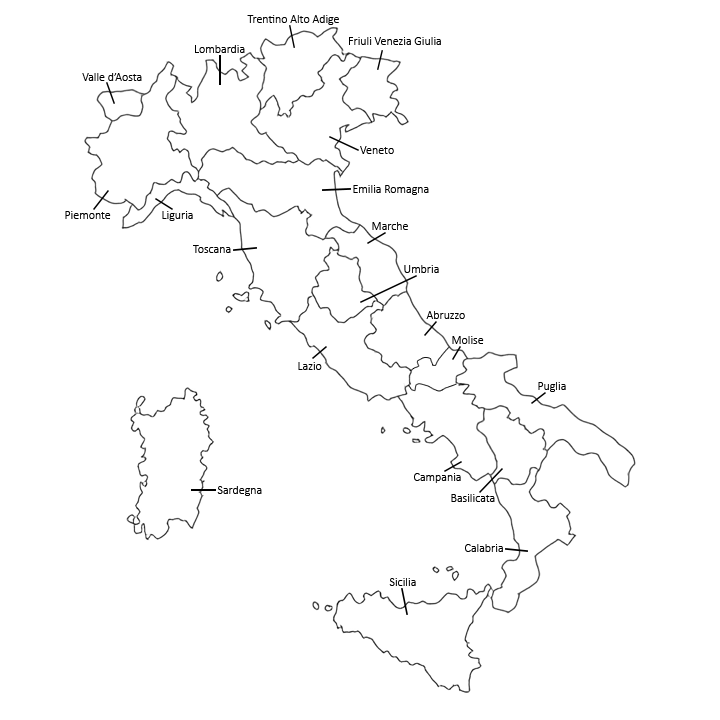
<style>
.page{position:relative;width:720px;height:720px;background:#ffffff}
.page>*{position:absolute;margin:0}
.t1{font:12px "Calibri-Light";color:#000000}
</style>
<div class="page">
<p class="t1" style="left:247px;top:15px;width:92px;height:10px">Trentino Alto Adige</p>
<p class="t1" style="left:349px;top:37px;width:92px;height:8px">Friuli Venezia Giulia</p>
<p class="t1" style="left:195px;top:45px;width:50px;height:8px">Lombardia</p>
<p class="t1" style="left:82px;top:73px;width:60px;height:8px">Valle d’Aosta</p>
<p class="t1" style="left:360px;top:146px;width:34px;height:8px">Veneto</p>
<p class="t1" style="left:353px;top:185px;width:76px;height:10px">Emilia Romagna</p>
<p class="t1" style="left:65px;top:211px;width:46px;height:8px">Piemonte</p>
<p class="t1" style="left:162px;top:211px;width:31px;height:10px">Liguria</p>
<p class="t1" style="left:372px;top:222px;width:36px;height:8px">Marche</p>
<p class="t1" style="left:193px;top:245px;width:38px;height:8px">Toscana</p>
<p class="t1" style="left:404px;top:265px;width:35px;height:8px">Umbria</p>
<p class="t1" style="left:426px;top:311px;width:39px;height:8px">Abruzzo</p>
<p class="t1" style="left:452px;top:336px;width:32px;height:8px">Molise</p>
<p class="t1" style="left:298px;top:362px;width:24px;height:8px">Lazio</p>
<p class="t1" style="left:538px;top:382px;width:28px;height:10px">Puglia</p>
<p class="t1" style="left:414px;top:473px;width:47px;height:10px">Campania</p>
<p class="t1" style="left:217px;top:486px;width:45px;height:10px">Sardegna</p>
<p class="t1" style="left:451px;top:494px;width:44px;height:8px">Basilicata</p>
<p class="t1" style="left:465px;top:544px;width:38px;height:8px">Calabria</p>
<p class="t1" style="left:389px;top:578px;width:27px;height:8px">Sicilia</p>
</div>
